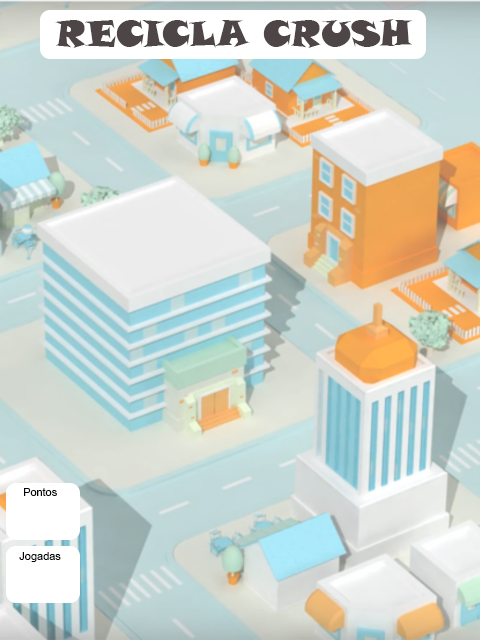
<style>
.page{position:relative;width:480px;height:640px}
.page>*{position:absolute;margin:0}
.t1{font:36px "SnapITC-Regular";color:#4d4546}
.t2{font:11px "ArialMT";color:#040404}
</style>
<div class="page">
<p class="t1" style="left:55px;top:19px;width:357px;height:29px">RECICLA CRUSH</p>
<p class="t2" style="left:24px;top:488px;width:33px;height:8px">Pontos</p>
<p class="t2" style="left:19px;top:552px;width:42px;height:10px">Jogadas</p>
</div>
